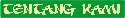
<style>
.page{position:relative;width:125px;height:18px;background:#029834}
.page>*{position:absolute;margin:0}
.t1{font:16.2px "SevenSwordsmenBB";color:#eeefa3}
</style>
<div class="page">
<p class="t1" style="left:3px;top:4px;width:117px;height:12px">tentang kami</p>
</div>
